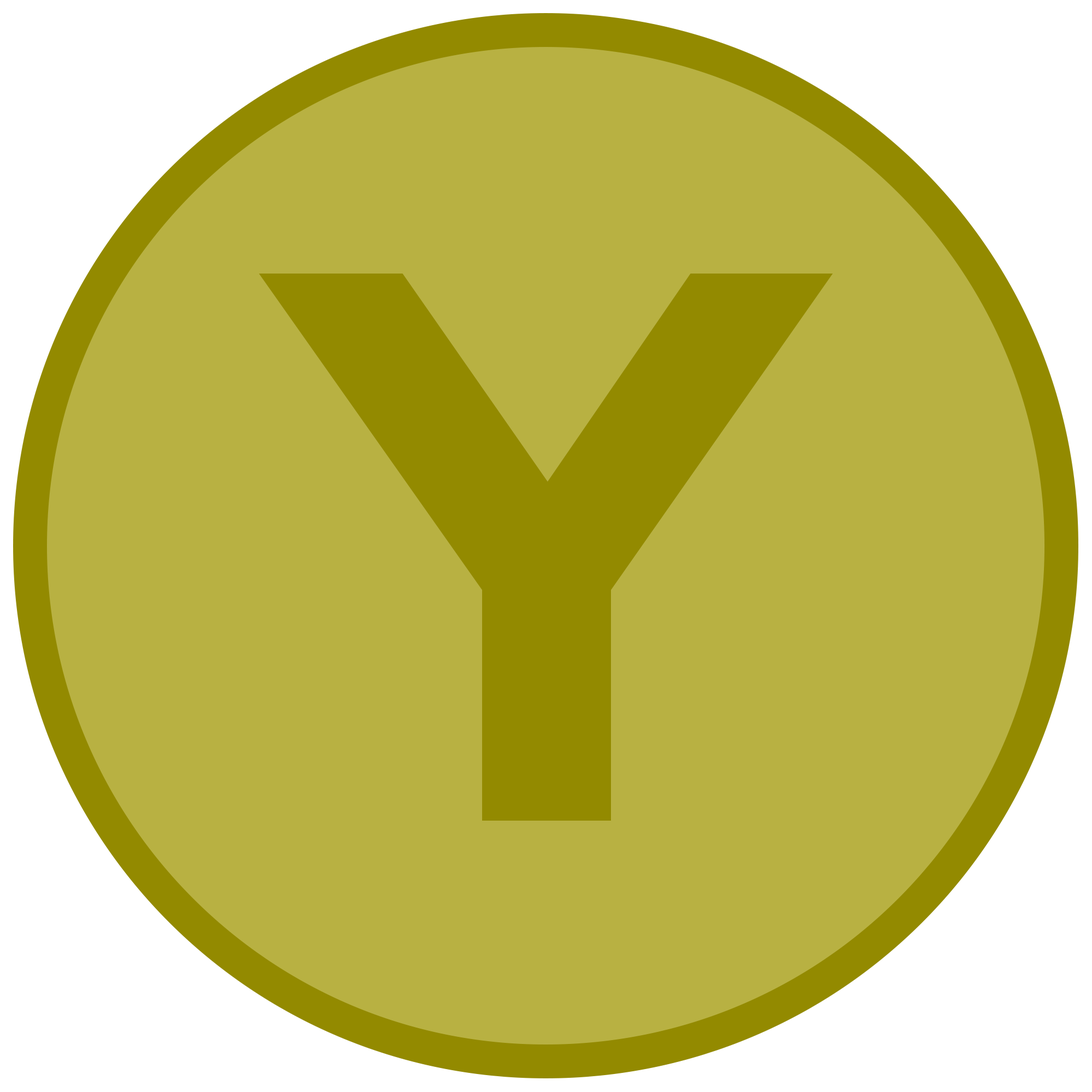
<style>
.page{position:relative;width:1092px;height:1092px;background:#b8b142}
.page>*{position:absolute;margin:0}
.t1{font:665px "RabbidHighwaySignII";color:#938a00;scale:1.06 1}
</style>
<div class="page">
<p class="t1" style="left:259px;top:274px;width:574px;height:547px">Y</p>
</div>
